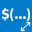
<style>
.page{position:relative;width:32px;height:32px;background:#007bcc}
.page>*{position:absolute;margin:0}
.t1{font:15.3px "MyriadPro-Bold";color:#ffffff}
</style>
<div class="page">
<p class="t1" style="left:2px;top:8px;width:28px;height:13px">$(...)</p>
</div>
